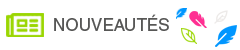
<style>
.page{position:relative;width:240px;height:50px;background:#ffffff}
.page>*{position:absolute;margin:0}
.t1{font:17px "Helvetica";color:#575756;text-transform:uppercase}
</style>
<div class="page">
<p class="t1" style="left:54px;top:14px;width:115px;height:17px">NOUVEAUTéS</p>
</div>
